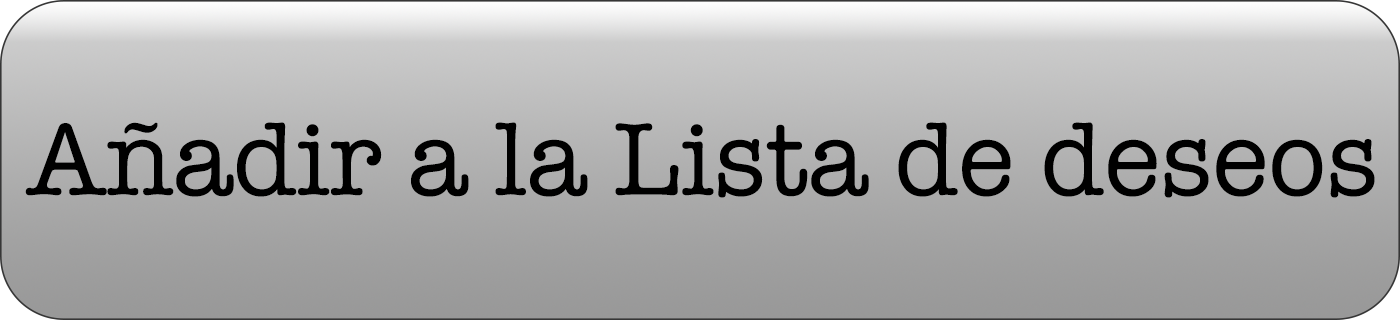
<style>
.page{position:relative;width:1400px;height:320px}
.page>*{position:absolute;margin:0}
.t1{font:106px "AmericanTypewriter";color:#000000}
</style>
<div class="page">
<p class="t1" style="left:25px;top:122px;width:1350px;height:76px">Añadir a la Lista de deseos</p>
</div>
